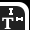
<style>
.page{position:relative;width:30px;height:30px;background:#212121}
.page>*{position:absolute;margin:0}
.t1{font:16.9px "SitkaSmall-Bold";color:#ffffff}
</style>
<div class="page">
<p class="t1" style="left:2px;top:17px;width:12px;height:12px">T</p>
</div>
